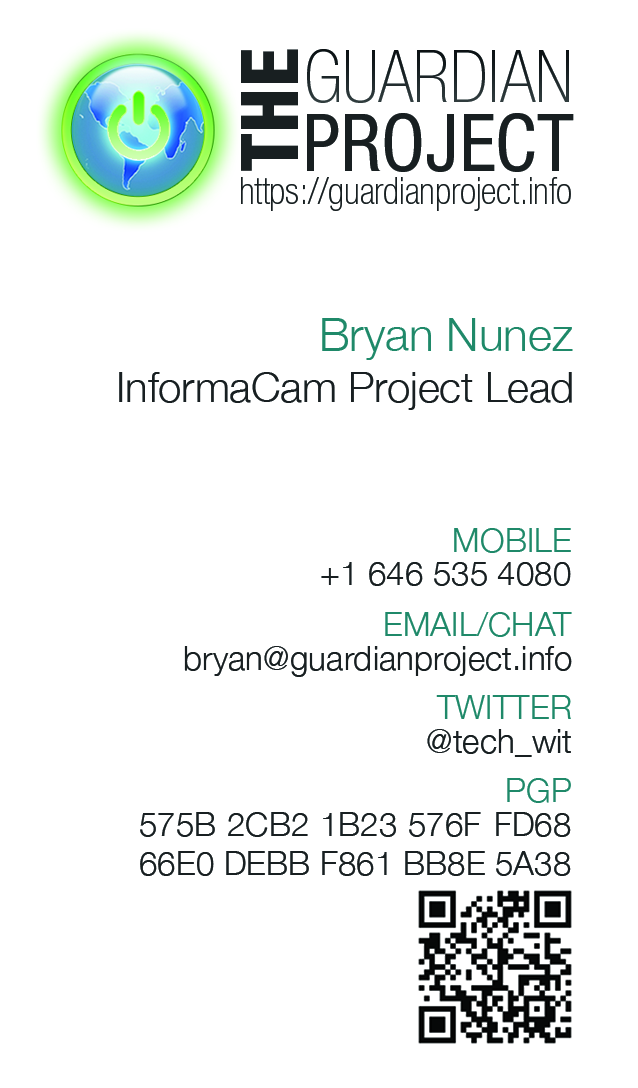
<style>
.page{position:relative;width:638px;height:1088px;background:#ffffff}
.page>*{position:absolute;margin:0}
.t1{font:79.2px "HelveticaNeueLTStd-HvCn";color:#181f21}
.t2{font:72.9px "HelveticaNeueLTStd-ThCn";color:#181f21}
.t3{font:79.2px "HelveticaNeueLTStd-Cn";color:#181f21}
.t4{font:37.5px "HelveticaNeueLTStd-ThCn";color:#181f21}
.t5{font:45.8px "HelveticaNeue-Light";color:#1f8969}
.t6{font:41.7px "HelveticaNeue-Light";color:#181f21}
.t7{font:33.3px/83.3px "HelveticaNeue-Light";color:#1f8969}
.t8{font:33.3px "HelveticaNeue-Light";color:#181f21}
</style>
<div class="page">
<p class="t1" style="left:241px;top:49px;width:57px;height:122px;rotate:-90deg">THE</p>
<p class="t2" style="left:307px;top:49px;width:262px;height:54px">GUARDIAN</p>
<p class="t3" style="left:307px;top:113px;width:267px;height:59px">PROJECT</p>
<p class="t4" style="left:241px;top:177px;width:330px;height:34px">https://guardianproject.info</p>
<p class="t5" style="left:322px;top:318px;width:251px;height:42px">Bryan Nunez</p>
<p class="t6" style="left:119px;top:372px;width:453px;height:38px">InformaCam Project Lead</p>
<p class="t7" style="left:385px;top:528px;width:187px;height:275px;text-align:right">MOBILE<br>EMAIL/CHAT<br>TWITTER<br>PGP</p>
<p class="t8" style="left:321px;top:562px;width:250px;height:24px">+1 646 535 4080</p>
<p class="t8" style="left:184px;top:646px;width:388px;height:31px">bryan@guardianproject.info</p>
<p class="t8" style="left:427px;top:729px;width:144px;height:28px">@tech_wit</p>
<p class="t8" style="left:140px;top:812px;width:431px;height:64px">575B 2CB2 1B23 576F FD68<br>66E0 DEBB F861 BB8E 5A38</p>
</div>
